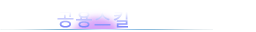
<style>
.page{position:relative;width:256px;height:32px;background:#ffffff}
.page>*{position:absolute;margin:0}
.t1{font:18px "MalgunGothicRegular";font-weight:bold}
</style>
<div class="page">
<p class="t1" style="left:57px;top:11px;width:71px;height:17px">공용스킬</p>
</div>
